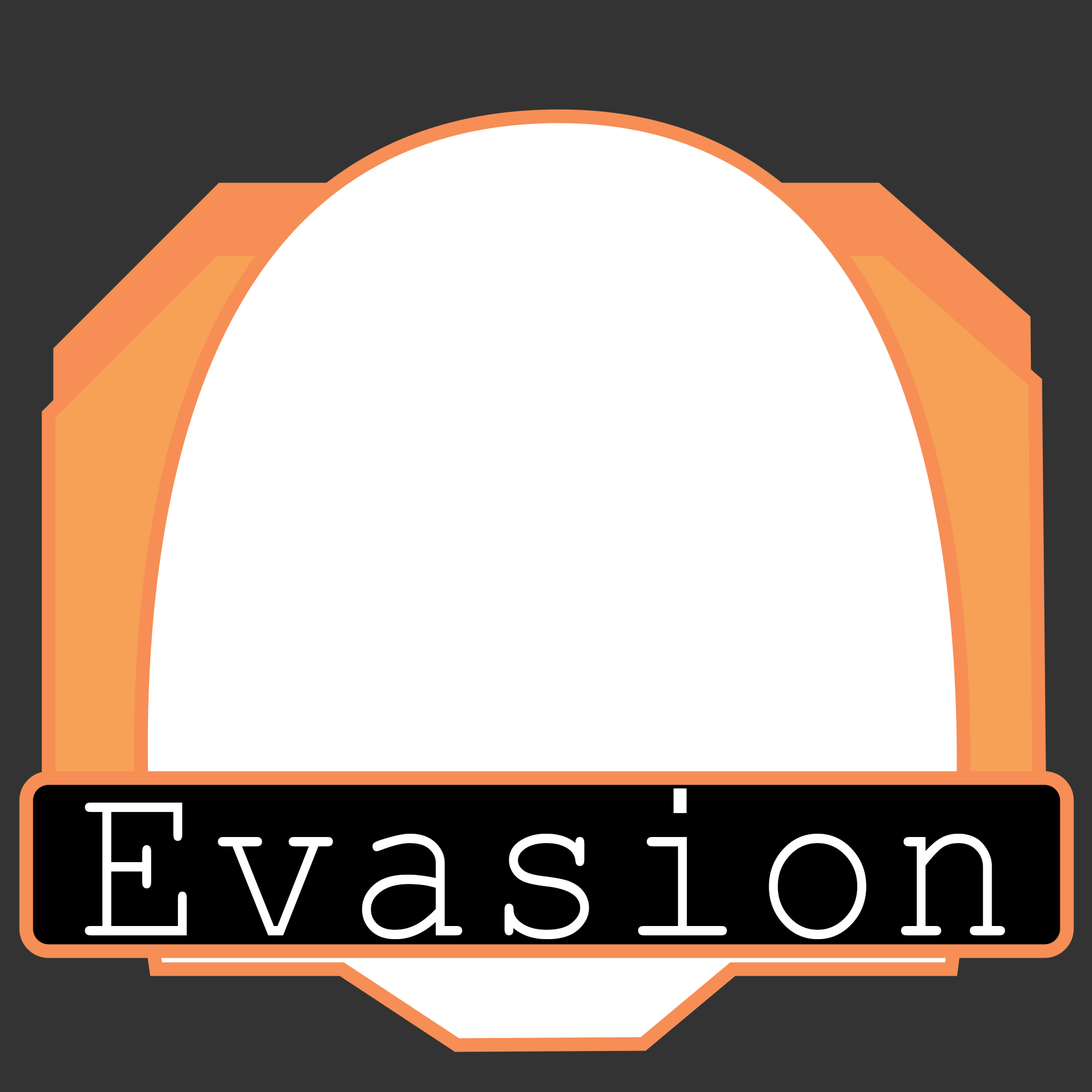
<style>
.page{position:relative;width:1092px;height:1092px;background:#ffffff}
.page>*{position:absolute;margin:0}
.t1{font:232px "CourierNewPSMT";letter-spacing:0.04em;color:#ffffff;scale:0.91 1}
</style>
<div class="page">
<p class="t1" style="left:85px;top:788px;width:920px;height:151px">Evasion</p>
</div>
